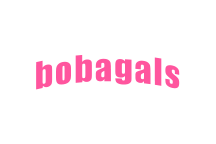
<style>
.page{position:relative;width:216px;height:144px;background:#ffffff}
.page>*{position:absolute;margin:0}
.t1{font:36px "Impact";color:#ff559e}
</style>
<div class="page">
<p class="t1" style="left:36px;top:54px;width:144px;height:36px">bobagals</p>
</div>
